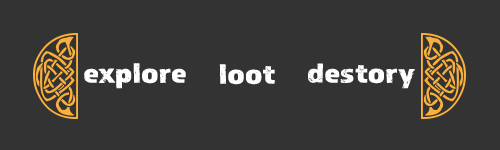
<style>
.page{position:relative;width:500px;height:150px;background:#333333}
.page>*{position:absolute;margin:0}
.t1{font:28.8px "Almaq-Rough";color:#ffffff;scale:1.25 1}
</style>
<div class="page">
<p class="t1" style="left:84px;top:63px;width:102px;height:26px">explore</p>
<p class="t1" style="left:219px;top:64px;width:56px;height:21px">loot</p>
<p class="t1" style="left:308px;top:63px;width:107px;height:26px">destory</p>
</div>
